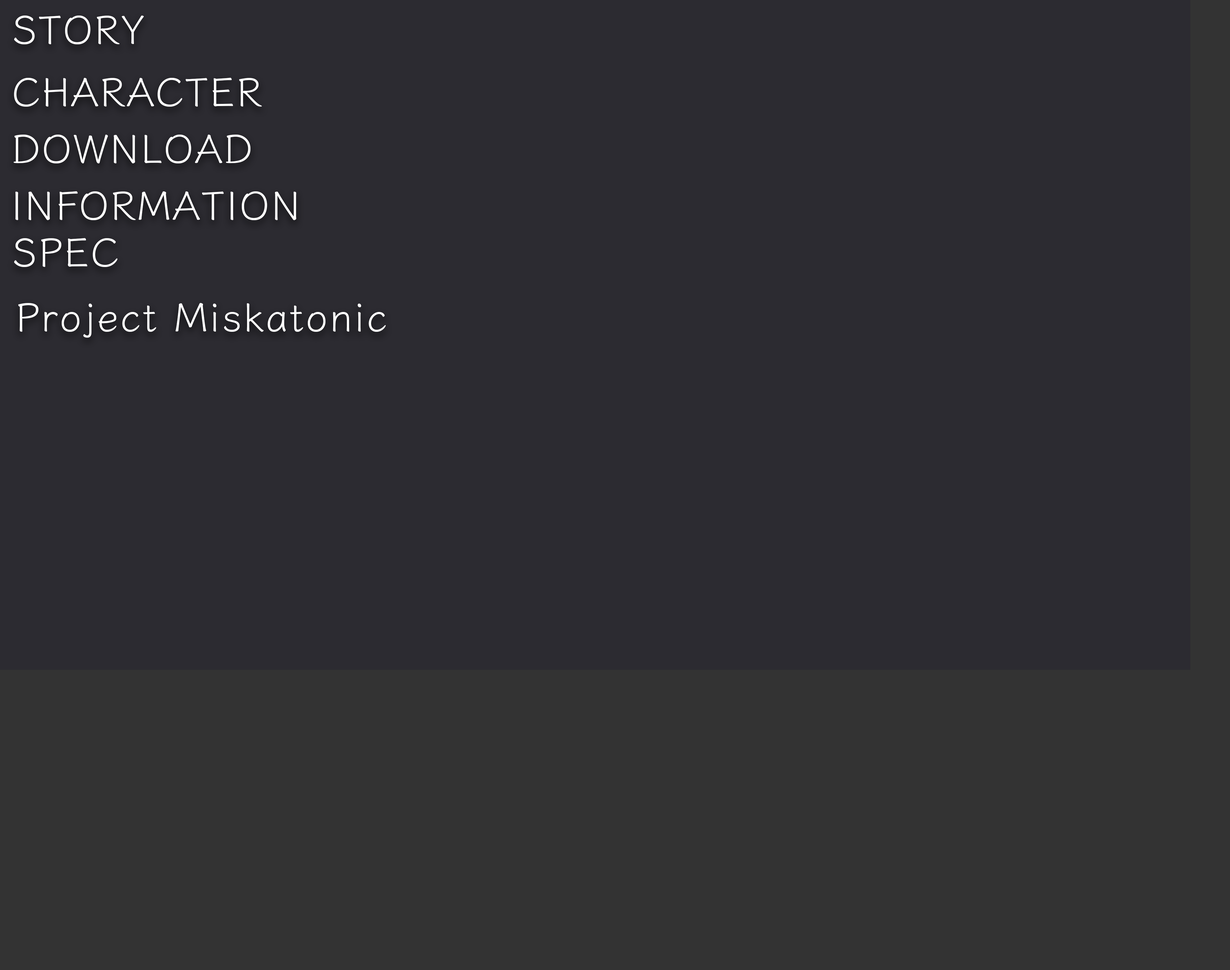
<style>
.page{position:relative;width:1230px;height:970px;background:#2c2b31}
.page>*{position:absolute;margin:0}
.t1{font:39.7px "Klee-Medium";letter-spacing:0.04em;color:#ffffff}
</style>
<div class="page">
<p class="t1" style="left:14px;top:15px;width:130px;height:29px">STORY</p>
<p class="t1" style="left:14px;top:77px;width:248px;height:30px">CHARACTER</p>
<p class="t1" style="left:14px;top:134px;width:237px;height:29px">DOWNLOAD</p>
<p class="t1" style="left:15px;top:191px;width:281px;height:29px">INFORMATION</p>
<p class="t1" style="left:14px;top:238px;width:103px;height:29px">SPEC</p>
<p class="t1" style="left:18px;top:303px;width:368px;height:35px">Project Miskatonic</p>
</div>
